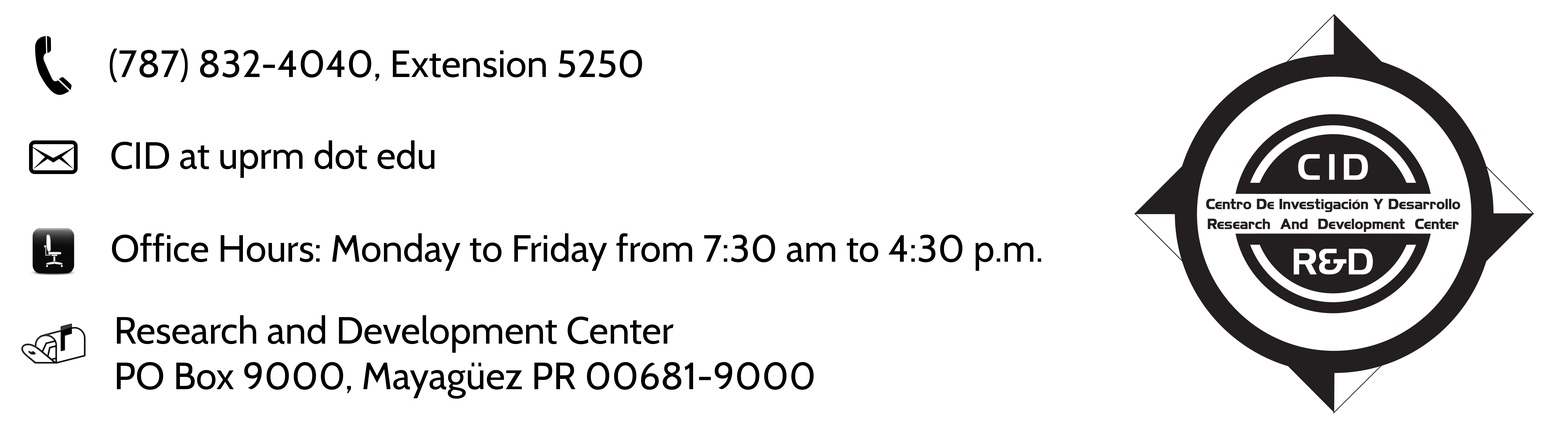
<style>
.page{position:relative;width:1568px;height:429px;background:#ffffff}
.page>*{position:absolute;margin:0}
.t1{font:38px "Cabin-Regular";color:#000000}
</style>
<div class="page">
<p class="t1" style="left:110px;top:49px;width:532px;height:33px">(787) 832-4040, Extension 5250</p>
<p class="t1" style="left:111px;top:140px;width:323px;height:38px">CID at uprm dot edu</p>
<p class="t1" style="left:112px;top:233px;width:929px;height:38px">Office Hours: Monday to Friday from 7:30 am to 4:30 p.m.</p>
<p class="t1" style="left:117px;top:315px;width:697px;height:84px">Research and Development Center<br>PO Box 9000, Mayagüez PR 00681-9000</p>
</div>
